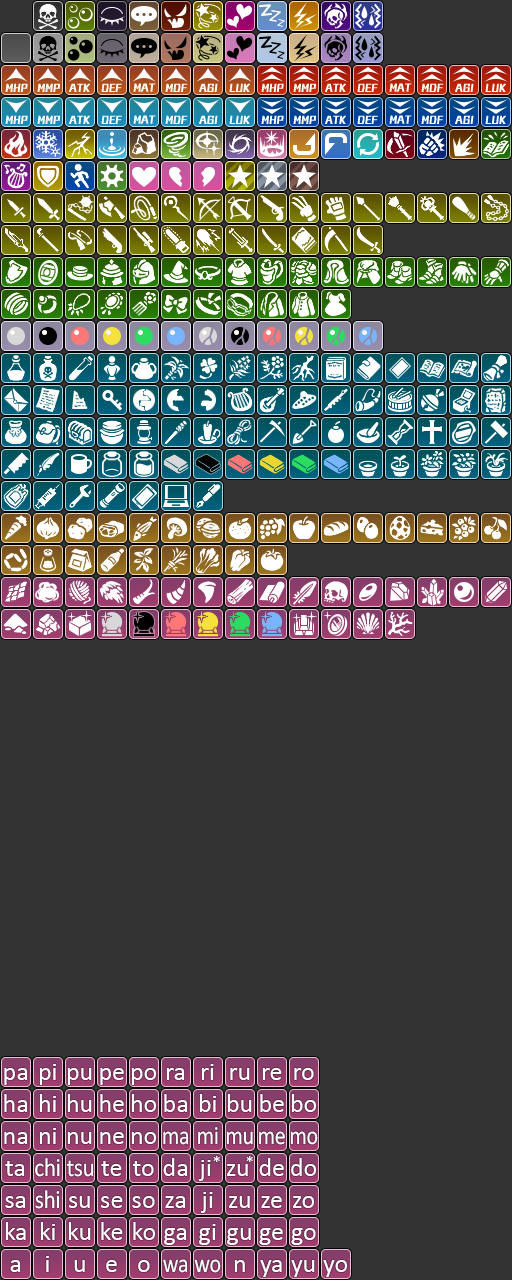
<style>
.page{position:relative;width:512px;height:1280px;background:#333333}
.page>*{position:absolute;margin:0}
.t1{font:26px "Calibri";color:#ffffff}
.t2{font:26px "Calibri";letter-spacing:-0.02em;color:#ffffff;scale:0.85 1}
.t3{font:26px "Calibri";letter-spacing:-0.02em;color:#ffffff;scale:0.9 1}
.t4{font:18px "Calibri";color:#ffffff}
</style>
<div class="page">
<p class="t1" style="left:4px;top:1068px;width:24px;height:17px">pa</p>
<p class="t1" style="left:39px;top:1064px;width:17px;height:21px">pi</p>
<p class="t1" style="left:67px;top:1068px;width:25px;height:17px">pu</p>
<p class="t1" style="left:100px;top:1068px;width:24px;height:17px">pe</p>
<p class="t1" style="left:131px;top:1068px;width:26px;height:17px">po</p>
<p class="t1" style="left:166px;top:1068px;width:19px;height:12px">ra</p>
<p class="t1" style="left:201px;top:1064px;width:13px;height:16px">ri</p>
<p class="t1" style="left:230px;top:1068px;width:20px;height:12px">ru</p>
<p class="t1" style="left:262px;top:1068px;width:20px;height:12px">re</p>
<p class="t1" style="left:294px;top:1068px;width:20px;height:12px">ro</p>
<p class="t1" style="left:4px;top:1094px;width:24px;height:18px">ha</p>
<p class="t1" style="left:39px;top:1094px;width:17px;height:18px">hi</p>
<p class="t1" style="left:67px;top:1094px;width:25px;height:18px">hu</p>
<p class="t1" style="left:100px;top:1094px;width:24px;height:18px">he</p>
<p class="t1" style="left:131px;top:1094px;width:26px;height:18px">ho</p>
<p class="t1" style="left:164px;top:1094px;width:24px;height:18px">ba</p>
<p class="t1" style="left:199px;top:1094px;width:17px;height:18px">bi</p>
<p class="t1" style="left:227px;top:1094px;width:25px;height:18px">bu</p>
<p class="t1" style="left:260px;top:1094px;width:24px;height:18px">be</p>
<p class="t1" style="left:291px;top:1094px;width:26px;height:18px">bo</p>
<p class="t1" style="left:4px;top:1132px;width:24px;height:12px">na</p>
<p class="t1" style="left:39px;top:1128px;width:17px;height:16px">ni</p>
<p class="t1" style="left:67px;top:1132px;width:25px;height:12px">nu</p>
<p class="t1" style="left:100px;top:1132px;width:24px;height:12px">ne</p>
<p class="t1" style="left:131px;top:1132px;width:26px;height:12px">no</p>
<p class="t2" style="left:163px;top:1131px;width:26px;height:14px">ma</p>
<p class="t2" style="left:198px;top:1127px;width:20px;height:18px">mi</p>
<p class="t2" style="left:226px;top:1131px;width:27px;height:14px">mu</p>
<p class="t2" style="left:259px;top:1131px;width:26px;height:14px">me</p>
<p class="t2" style="left:290px;top:1131px;width:28px;height:14px">mo</p>
<p class="t3" style="left:35px;top:1158px;width:25px;height:19px">chi</p>
<p class="t1" style="left:163px;top:1158px;width:25px;height:18px">da</p>
<p class="t4" style="left:213px;top:1156px;width:7px;height:6px">*</p>
<p class="t4" style="left:246px;top:1156px;width:7px;height:6px">*</p>
<p class="t1" style="left:259px;top:1158px;width:25px;height:18px">de</p>
<p class="t1" style="left:291px;top:1158px;width:26px;height:18px">do</p>
<p class="t1" style="left:5px;top:1161px;width:20px;height:15px">ta</p>
<p class="t3" style="left:66px;top:1160px;width:28px;height:17px">tsu</p>
<p class="t1" style="left:101px;top:1161px;width:21px;height:15px">te</p>
<p class="t1" style="left:132px;top:1161px;width:22px;height:15px">to</p>
<p class="t1" style="left:198px;top:1160px;width:13px;height:21px">ji</p>
<p class="t1" style="left:227px;top:1164px;width:21px;height:12px">zu</p>
<p class="t3" style="left:35px;top:1190px;width:25px;height:19px">shi</p>
<p class="t1" style="left:200px;top:1192px;width:13px;height:21px">ji</p>
<p class="t1" style="left:5px;top:1196px;width:21px;height:12px">sa</p>
<p class="t1" style="left:69px;top:1196px;width:21px;height:12px">su</p>
<p class="t1" style="left:101px;top:1196px;width:22px;height:12px">se</p>
<p class="t1" style="left:132px;top:1196px;width:23px;height:12px">so</p>
<p class="t1" style="left:165px;top:1196px;width:21px;height:12px">za</p>
<p class="t1" style="left:229px;top:1196px;width:21px;height:12px">zu</p>
<p class="t1" style="left:261px;top:1196px;width:21px;height:12px">ze</p>
<p class="t1" style="left:293px;top:1196px;width:22px;height:12px">zo</p>
<p class="t1" style="left:5px;top:1222px;width:21px;height:18px">ka</p>
<p class="t1" style="left:40px;top:1222px;width:15px;height:18px">ki</p>
<p class="t1" style="left:68px;top:1222px;width:23px;height:18px">ku</p>
<p class="t1" style="left:101px;top:1222px;width:22px;height:18px">ke</p>
<p class="t1" style="left:133px;top:1222px;width:23px;height:18px">ko</p>
<p class="t1" style="left:164px;top:1228px;width:23px;height:17px">ga</p>
<p class="t1" style="left:199px;top:1224px;width:17px;height:21px">gi</p>
<p class="t1" style="left:227px;top:1228px;width:24px;height:17px">gu</p>
<p class="t1" style="left:259px;top:1228px;width:24px;height:17px">ge</p>
<p class="t1" style="left:291px;top:1228px;width:25px;height:17px">go</p>
<p class="t1" style="left:10px;top:1260px;width:11px;height:12px">a</p>
<p class="t1" style="left:46px;top:1256px;width:3px;height:16px">i</p>
<p class="t1" style="left:74px;top:1260px;width:11px;height:12px">u</p>
<p class="t1" style="left:106px;top:1260px;width:11px;height:12px">e</p>
<p class="t1" style="left:138px;top:1260px;width:12px;height:12px">o</p>
<p class="t2" style="left:163px;top:1259px;width:25px;height:14px">wa</p>
<p class="t2" style="left:194px;top:1259px;width:27px;height:14px">wo</p>
<p class="t1" style="left:234px;top:1260px;width:11px;height:12px">n</p>
<p class="t1" style="left:260px;top:1260px;width:22px;height:17px">ya</p>
<p class="t1" style="left:291px;top:1260px;width:24px;height:17px">yu</p>
<p class="t1" style="left:323px;top:1260px;width:25px;height:17px">yo</p>
</div>
